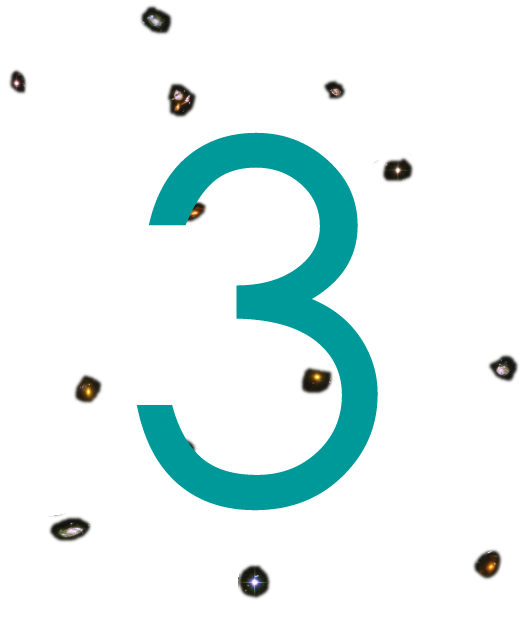
<style>
.page{position:relative;width:532px;height:618px;background:#ffffff}
.page>*{position:absolute;margin:0}
.t1{font:500.1px "STHeitiSC-Light";color:#009999}
</style>
<div class="page">
<p class="t1" style="left:136px;top:132px;width:242px;height:379px">3</p>
</div>
